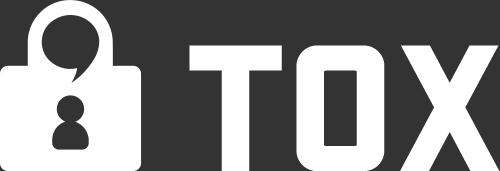
<style>
.page{position:relative;width:500px;height:171px;background:#333333}
.page>*{position:absolute;margin:0}
.t1{font:188.3px "StratumNo1-Black";color:#ffffff}
</style>
<div class="page">
<p class="t1" style="left:189px;top:45px;width:311px;height:126px">TOX</p>
</div>
